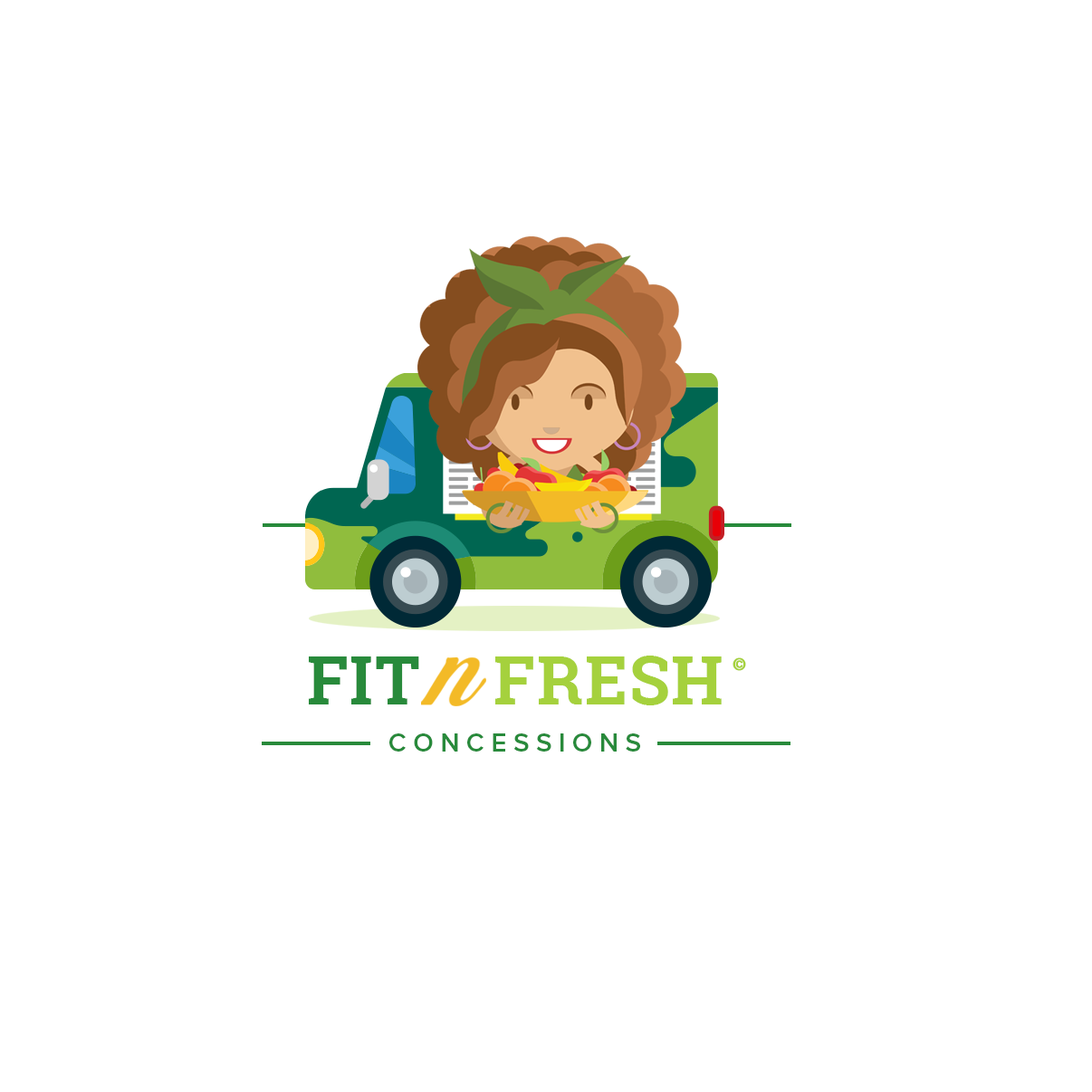
<style>
.page{position:relative;width:1092px;height:1092px;background:#ffffff}
.page>*{position:absolute;margin:0}
.t1{font:66.9px "RobotoSlab-Bold";letter-spacing:0.025em;color:#a5d13d;text-transform:uppercase}
.t2{font:66.9px "RobotoSlab-Bold";letter-spacing:0.025em;color:#288a3b;text-transform:uppercase}
.t3{font:17.1px "FrutigerLTStd-Bold";letter-spacing:0.1em;color:#a5d13d;text-transform:uppercase;font-weight:bold}
.t4{font:26.4px "ProximaNova-Semibold";letter-spacing:0.26em;color:#288a3b}
</style>
<div class="page">
<p class="t1" style="left:309px;top:656px;width:413px;height:49px"><span class="t2">Fit    </span>Fresh</p>
<p class="t3" style="left:733px;top:657px;width:13px;height:14px">©</p>
<p class="t4" style="left:389px;top:733px;width:251px;height:19px">CONCESSIONS</p>
</div>
